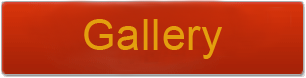
<style>
.page{position:relative;width:306px;height:78px}
.page>*{position:absolute;margin:0}
.t1{font:43.2px "ArialMT";letter-spacing:0.02em;color:#e39f0e}
</style>
<div class="page">
<p class="t1" style="left:84px;top:19px;width:138px;height:40px">Gallery</p>
</div>
